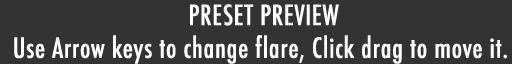
<style>
.page{position:relative;width:512px;height:64px;background:#333333}
.page>*{position:absolute;margin:0}
.t1{font:27.3px "Futura-CondensedMedium";color:#ffffff;font-weight:bold}
</style>
<div class="page">
<p class="t1" style="left:14px;top:4px;width:493px;height:60px;text-align:center">PRESET PREVIEW<br>Use Arrow keys to change flare, Click drag to move it.</p>
</div>
